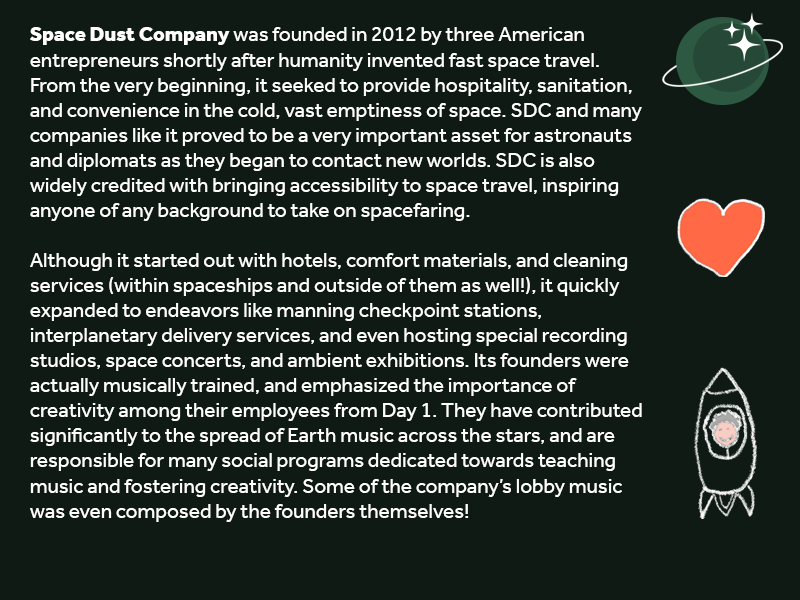
<style>
.page{position:relative;width:800px;height:600px;background:#0f1a14}
.page>*{position:absolute;margin:0}
.t1{font:20.9px "Effra-Regular";color:#ffffff}
.t2{font:20.9px "Effra-Heavy";color:#ffffff}
</style>
<div class="page">
<p class="t1" style="left:30px;top:27px;width:612px;height:495px"><span class="t2">Space Dust Company</span> was founded in 2012 by three American entrepreneurs shortly after humanity invented fast space travel. From the very beginning, it seeked to provide hospitality, sanitation, and convenience in the cold, vast emptiness of space. SDC and many companies like it proved to be a very important asset for astronauts and diplomats as they began to contact new worlds. SDC is also widely credited with bringing accessibility to space travel, inspiring anyone of any background to take on spacefaring.<br><br>Although it started out with hotels, comfort materials, and cleaning services (within spaceships and outside of them as well!), it quickly expanded to endeavors like manning checkpoint stations, interplanetary delivery services, and even hosting special recording studios, space concerts, and ambient exhibitions. Its founders were actually musically trained, and emphasized the importance of creativity among their employees from Day 1. They have contributed significantly to the spread of Earth music across the stars, and are responsible for many social programs dedicated towards teaching music and fostering creativity. Some of the company’s lobby music was even composed by the founders themselves!</p>
</div>
